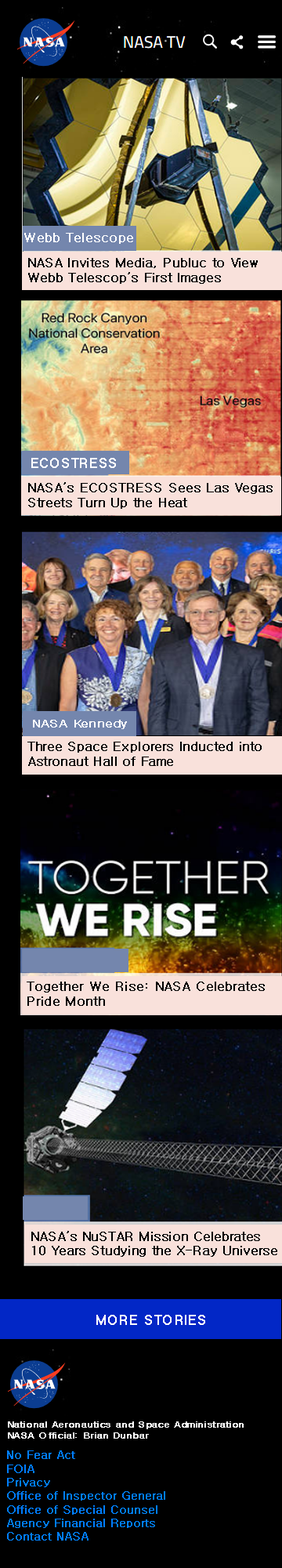
<style>
.page{position:relative;width:282px;height:1568px;background:#000000}
.page>*{position:absolute;margin:0}
.t1{font:12.8px "Gulim";color:#ffffff;font-weight:bold}
.t2{font:12.5px "Gulim";color:#000000;font-weight:bold}
.t3{font:13.1px "Gulim";color:#ffffff;font-weight:bold}
.t4{font:11.3px "Gulim";color:#ffffff;font-weight:bold;scale:1.12 1}
.t5{font:12.7px "Gulim";color:#000000;font-weight:bold}
.t6{font:12.4px "Gulim";color:#000000;font-weight:bold}
.t7{font:13.3px "Gulim";color:#ffffff;font-weight:bold}
.t8{font:9.2px "Gulim";color:#ffffff;font-weight:bold;scale:1.07 1}
.t9{font:11.3px "Gulim";color:#007eff;font-weight:bold}
</style>
<div class="page">
<p class="t1" style="left:24px;top:233px;width:109px;height:11px">Webb Telescope</p>
<p class="t2" style="left:28px;top:258px;width:230px;height:26px">NASA Invites Media, Publuc to View<br>Webb Telescop’s First Images</p>
<p class="t3" style="left:31px;top:458px;width:85px;height:10px">ECOSTRESS</p>
<p class="t2" style="left:28px;top:482px;width:245px;height:27px">NASA’s ECOSTRESS Sees Las Vegas<br>Streets Turn Up the Heat</p>
<p class="t4" style="left:33px;top:720px;width:94px;height:9px">NASA Kennedy</p>
<p class="t2" style="left:27px;top:742px;width:235px;height:24px">Three Space Explorers Inducted into<br>Astronaut Hall of Fame</p>
<p class="t5" style="left:27px;top:982px;width:238px;height:24px">Together We Rise: NASA Celebrates<br>Pride Month</p>
<p class="t6" style="left:31px;top:1231px;width:247px;height:26px">NASA’s NuSTAR Mission Celebrates<br>10 Years Studying the X-Ray Universe</p>
<p class="t7" style="left:96px;top:1315px;width:109px;height:10px">MORE STORIES</p>
<p class="t8" style="left:8px;top:1421px;width:236px;height:18px">National Aeronautics and Space Administration<br>NASA Official: Brian Dunbar</p>
<p class="t9" style="left:7px;top:1450px;width:158px;height:91px">No Fear Act<br>FOIA<br>Privacy<br>Office of Inspector General<br>Office of Special Counsel<br>Agency Financial Reports<br>Contact NASA</p>
</div>
